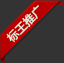
<style>
.page{position:relative;width:64px;height:63px;background:#333333}
.page>*{position:absolute;margin:0}
.t1{font:11px "MicrosoftYaHei";color:#e5eede;font-weight:bold}
</style>
<div class="page">
<p class="t1" style="left:6px;top:5px;width:33px;height:38px;rotate:-45deg">标王推广</p>
</div>
